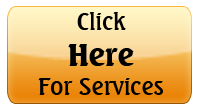
<style>
.page{position:relative;width:199px;height:108px}
.page>*{position:absolute;margin:0}
.t1{font:24px "Seagull-Medium";color:#000000}
.t2{font:30px "Seagull-Black";color:#000000}
</style>
<div class="page">
<p class="t1" style="left:38px;top:12px;width:125px;height:83px;text-align:center">Click<br><span class="t2">Here<br></span>For Services</p>
</div>
